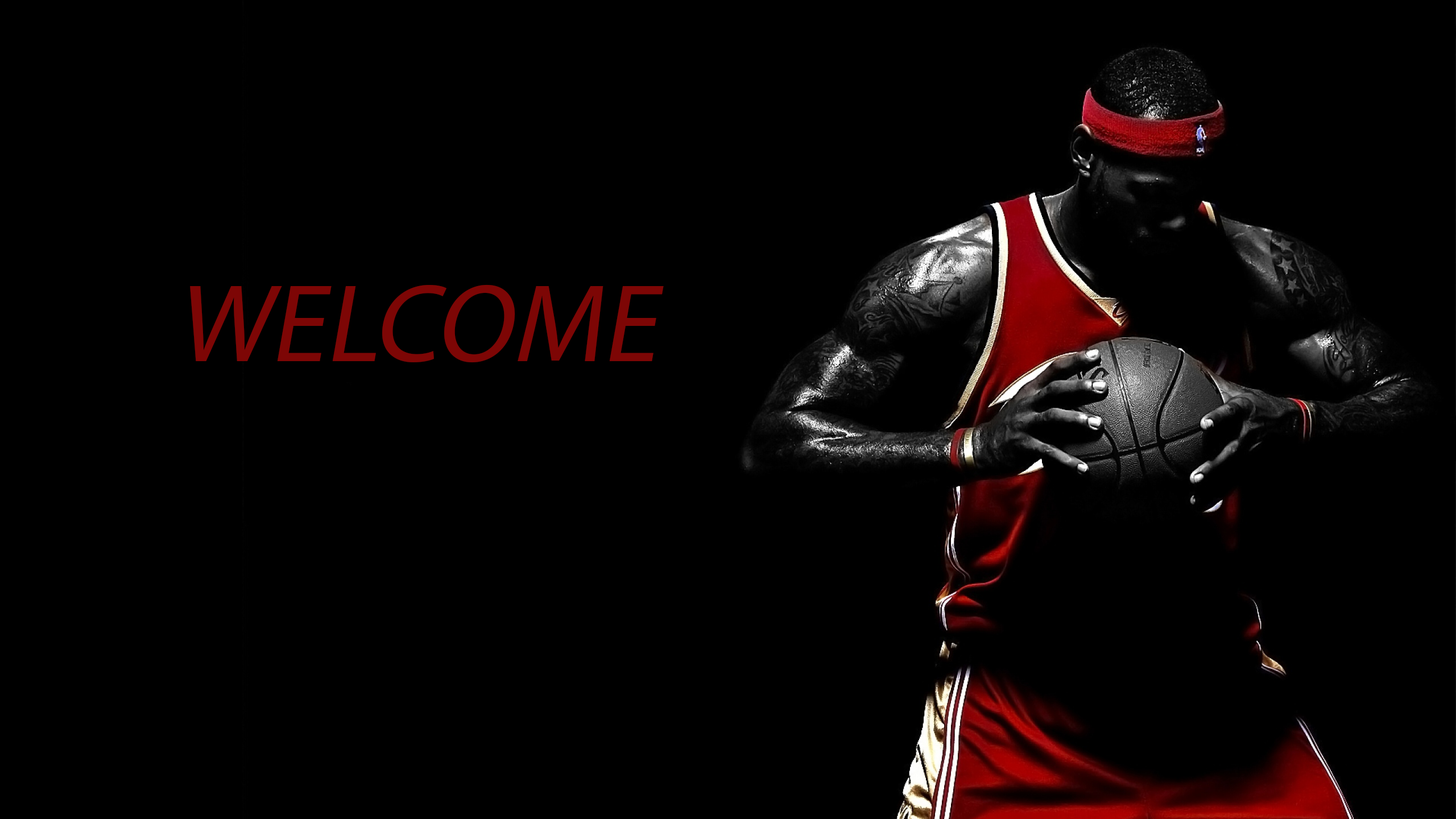
<style>
.page{position:relative;width:1456px;height:819px;background:#000000}
.page>*{position:absolute;margin:0}
.t1{font:191.1px "MyriadPro-Regular";color:#7d0605;font-style:italic}
</style>
<div class="page">
<p class="t1" style="left:190px;top:284px;width:474px;height:79px">WELCOME</p>
</div>
